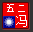
<style>
.page{position:relative;width:33px;height:32px;background:#f20000}
.page>*{position:absolute;margin:0}
.t1{font:10.4px "SimSun";color:#ffffff}
.t2{font:11.7px "SimSun";color:#ffffff}
</style>
<div class="page">
<p class="t1" style="left:7px;top:4px;width:18px;height:8px">五二</p>
<p class="t2" style="left:16px;top:15px;width:11px;height:12px">冯</p>
</div>
